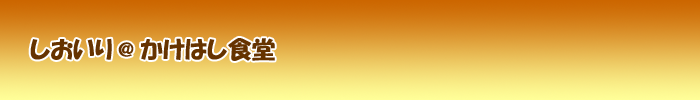
<style>
.page{position:relative;width:700px;height:100px}
.page>*{position:absolute;margin:0}
.t1{font:24px "HGPSoeiKakupoptai";color:#663300}
</style>
<div class="page">
<p class="t1" style="left:30px;top:38px;width:245px;height:23px">しおいり@かけはし食堂</p>
</div>
